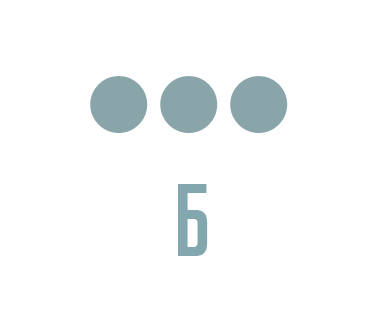
<style>
.page{position:relative;width:385px;height:319px;background:#ffffff}
.page>*{position:absolute;margin:0}
.t1{font:100px "BigNoodleTitlingCyr";color:#82a7ae}
</style>
<div class="page">
<p class="t1" style="left:178px;top:184px;width:30px;height:72px">Б</p>
</div>
